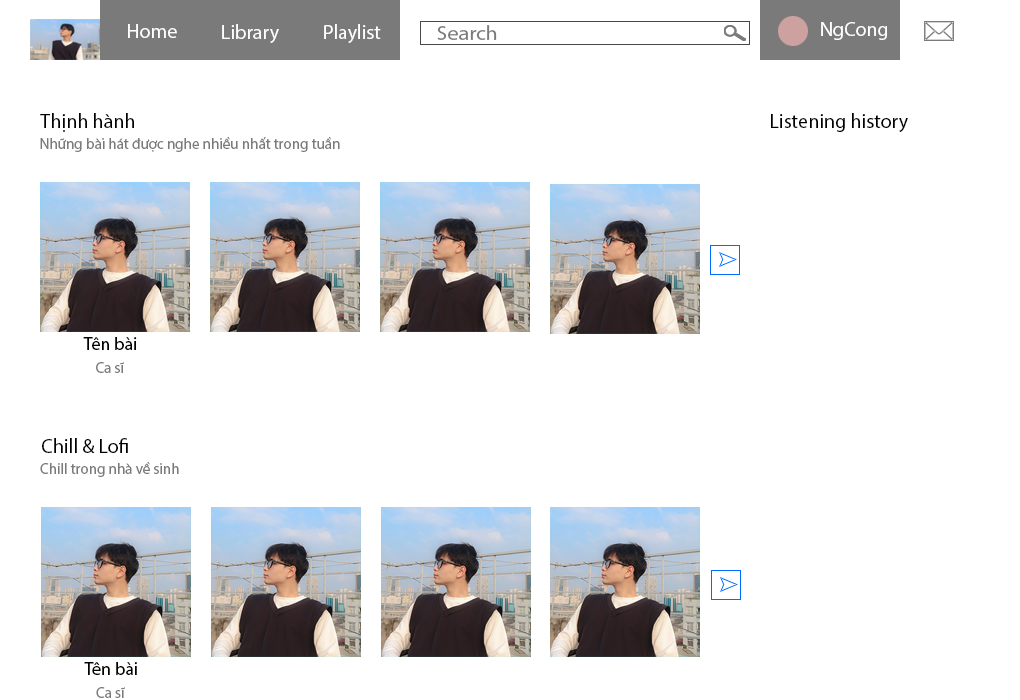
<style>
.page{position:relative;width:1020px;height:700px;background:#ffffff}
.page>*{position:absolute;margin:0}
.t1{font:20px "MyriadPro-Regular";color:#ffffff}
.t2{font:20px "MyriadPro-Regular";color:#7a7a7a;scale:1.1 1}
.t3{font:20px "MyriadPro-Regular";color:#000000}
.t4{font:15px "MyriadPro-Regular";color:#7a7a7a}
.t5{font:18px "MyriadPro-Regular";color:#000000}
</style>
<div class="page">
<p class="t1" style="left:128px;top:24px;width:49px;height:14px">Home</p>
<p class="t1" style="left:222px;top:24px;width:57px;height:19px">Library</p>
<p class="t1" style="left:324px;top:24px;width:57px;height:19px">Playlist</p>
<p class="t2" style="left:437px;top:25px;width:60px;height:15px">Search</p>
<p class="t1" style="left:821px;top:22px;width:66px;height:18px">NgCong</p>
<p class="t3" style="left:40px;top:113px;width:94px;height:19px">Thịnh hành</p>
<p class="t3" style="left:771px;top:113px;width:137px;height:19px">Listening history</p>
<p class="t4" style="left:40px;top:137px;width:300px;height:15px">Những bài hát được nghe nhiều nhất trong tuần</p>
<p class="t5" style="left:83px;top:337px;width:54px;height:13px">Tên bài</p>
<p class="t4" style="left:96px;top:362px;width:28px;height:11px">Ca sĩ</p>
<p class="t3" style="left:42px;top:438px;width:86px;height:15px">Chill &amp; Lofi</p>
<p class="t4" style="left:40px;top:462px;width:139px;height:15px">Chill trong nhà về sinh</p>
<p class="t5" style="left:84px;top:662px;width:53px;height:13px">Tên bài</p>
<p class="t4" style="left:96px;top:687px;width:29px;height:11px">Ca sĩ</p>
</div>
